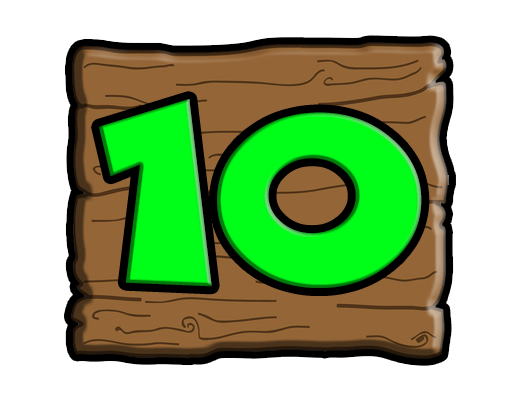
<style>
.page{position:relative;width:520px;height:400px;background:#ffffff}
.page>*{position:absolute;margin:0}
.t1{font:256.5px "Funhouse";color:#00ff18}
</style>
<div class="page">
<p class="t1" style="left:99px;top:99px;width:323px;height:189px">10</p>
</div>
